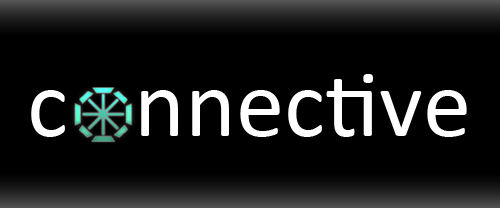
<style>
.page{position:relative;width:500px;height:208px;background:#000000}
.page>*{position:absolute;margin:0}
.t1{font:97px "Calibri";color:#ffffff}
</style>
<div class="page">
<p class="t1" style="left:31px;top:74px;width:436px;height:63px">c   nnective</p>
</div>
